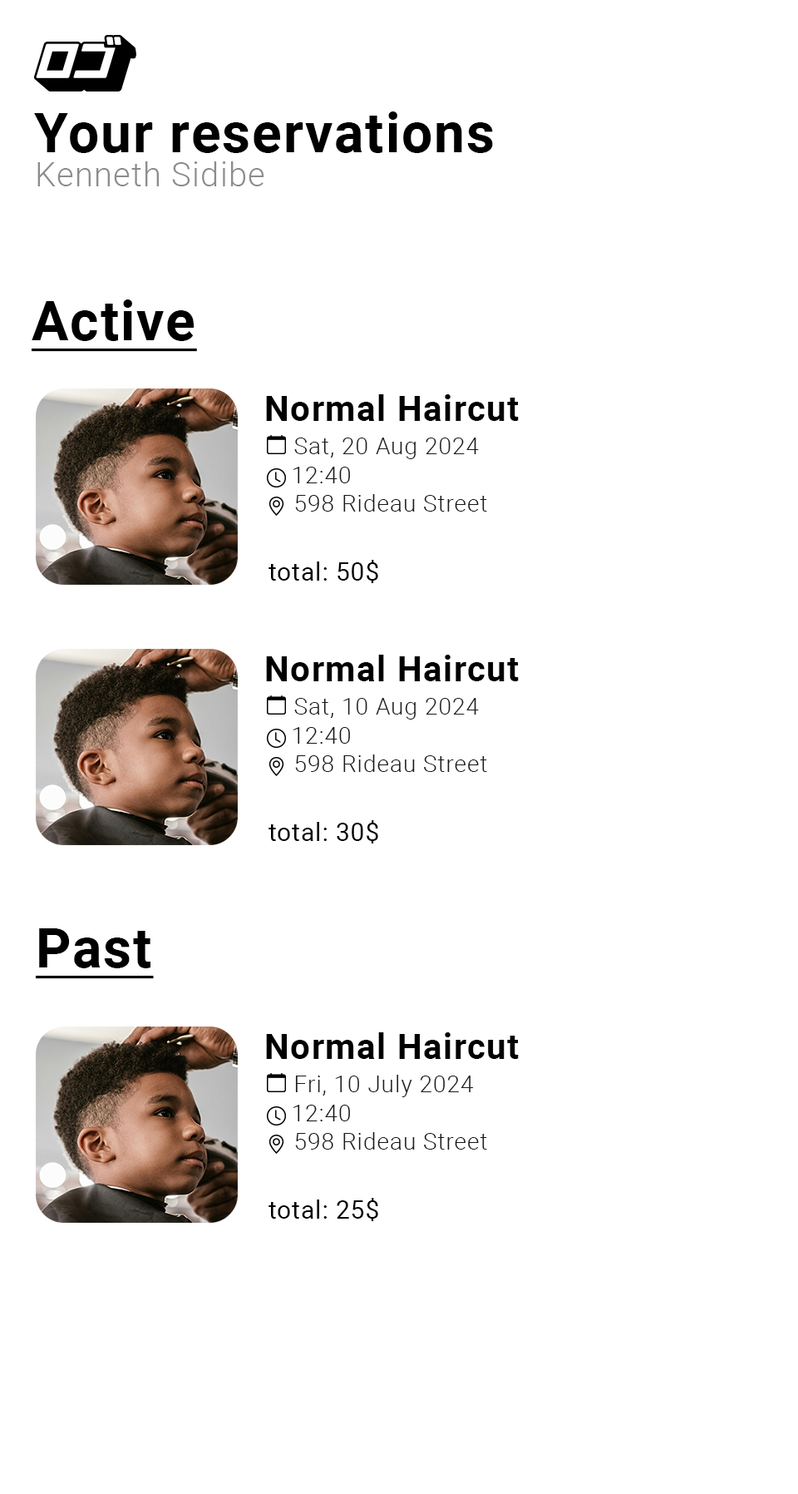
<style>
.page{position:relative;width:798px;height:1494px;background:#ffffff}
.page>*{position:absolute;margin:0}
.t1{font:54.8px "Roboto-Bold";letter-spacing:0.03em;color:#000000}
.t2{font:33.3px "Roboto-Light";letter-spacing:0.03em;color:#8c8c8c}
.t3{font:54.8px "Roboto-Bold";letter-spacing:0.03em;color:#000000;text-decoration:underline}
.t4{font:35.3px "Roboto-Bold";letter-spacing:0.03em;color:#000000}
.t5{font:23.5px "Roboto-Light";letter-spacing:0.03em;color:#1c1c1c}
.t6{font:23.5px "Roboto-Light";letter-spacing:0.03em;color:#161616}
.t7{font:23.5px "Roboto-Light";letter-spacing:0.03em;color:#181818}
.t8{font:24.9px "Roboto-Regular";letter-spacing:0.03em;color:#000000}
</style>
<div class="page">
<p class="t1" style="left:34px;top:111px;width:459px;height:42px">Your reservations</p>
<p class="t2" style="left:37px;top:161px;width:227px;height:25px">Kenneth Sidibe</p>
<p class="t3" style="left:32px;top:299px;width:165px;height:53px">Active</p>
<p class="t4" style="left:266px;top:394px;width:253px;height:27px">Normal Haircut</p>
<p class="t5" style="left:294px;top:437px;width:185px;height:22px">Sat, 20 Aug 2024</p>
<p class="t6" style="left:293px;top:467px;width:57px;height:16px">12:40</p>
<p class="t7" style="left:295px;top:494px;width:192px;height:17px">598 Rideau Street</p>
<p class="t8" style="left:269px;top:560px;width:109px;height:23px">total: 50$</p>
<p class="t4" style="left:266px;top:654px;width:253px;height:27px">Normal Haircut</p>
<p class="t5" style="left:294px;top:698px;width:185px;height:21px">Sat, 10 Aug 2024</p>
<p class="t6" style="left:293px;top:727px;width:57px;height:16px">12:40</p>
<p class="t7" style="left:295px;top:754px;width:192px;height:18px">598 Rideau Street</p>
<p class="t8" style="left:269px;top:820px;width:109px;height:23px">total: 30$</p>
<p class="t3" style="left:36px;top:928px;width:118px;height:51px">Past</p>
<p class="t4" style="left:266px;top:1032px;width:253px;height:27px">Normal Haircut</p>
<p class="t5" style="left:295px;top:1074px;width:179px;height:23px">Fri, 10 July 2024</p>
<p class="t6" style="left:293px;top:1104px;width:57px;height:17px">12:40</p>
<p class="t7" style="left:295px;top:1132px;width:192px;height:17px">598 Rideau Street</p>
<p class="t8" style="left:269px;top:1198px;width:109px;height:23px">total: 25$</p>
</div>
